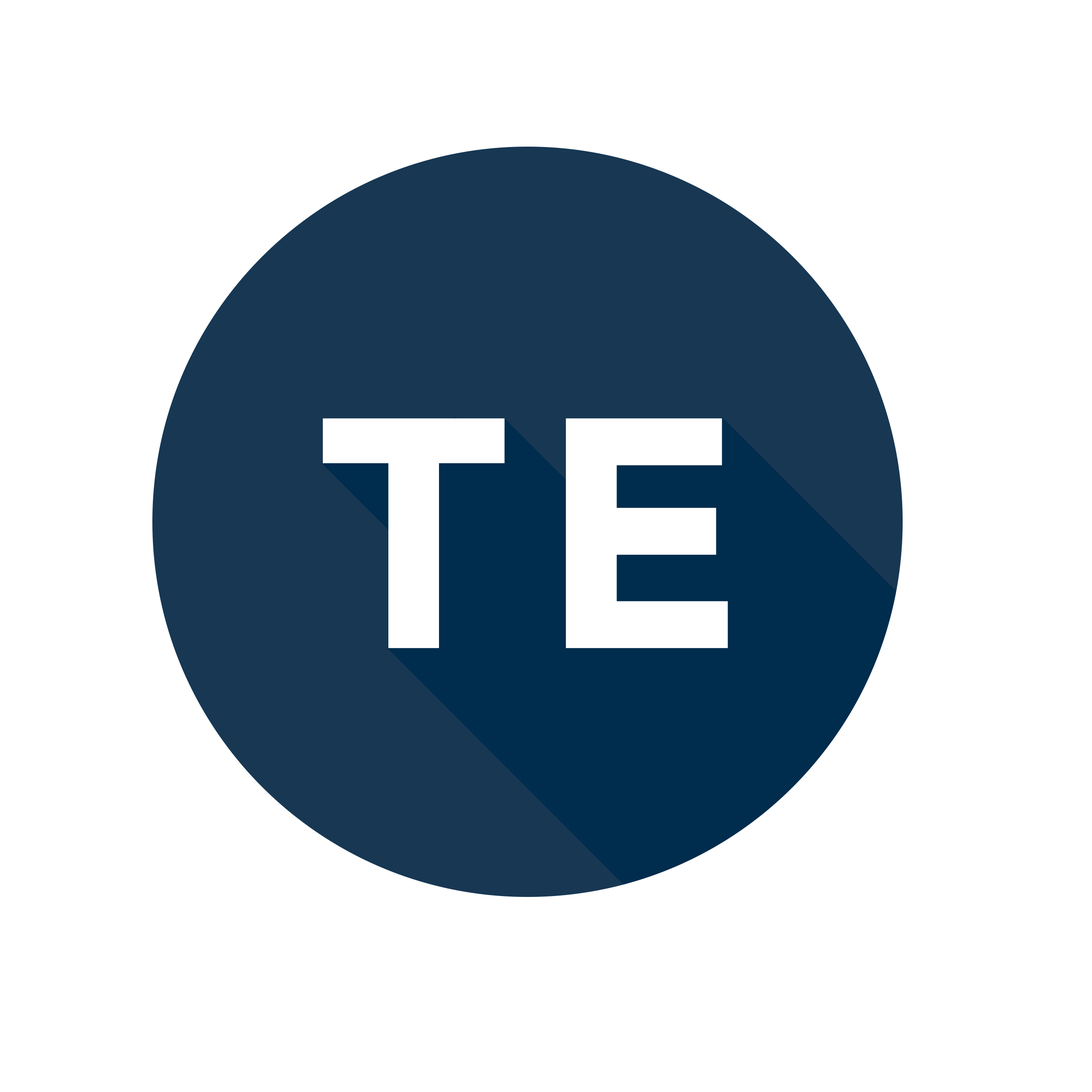
<style>
.page{position:relative;width:1092px;height:1092px;background:#ffffff}
.page>*{position:absolute;margin:0}
.t1{font:324.2px "Avenir-Black";letter-spacing:0.105em;color:#ffffff}
</style>
<div class="page">
<p class="t1" style="left:323px;top:418px;width:405px;height:230px">TE</p>
</div>
